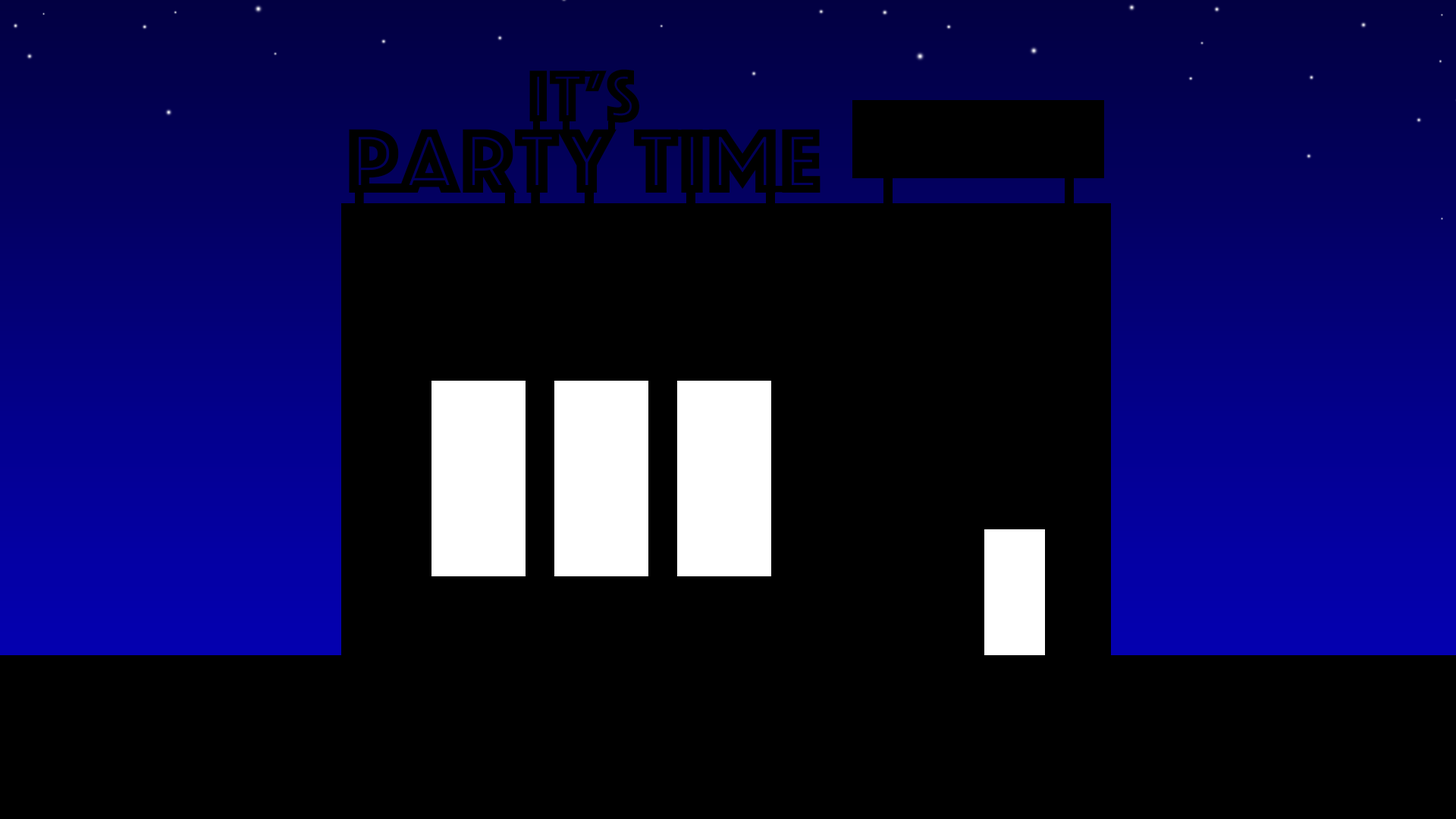
<style>
.page{position:relative;width:1456px;height:819px;background:#000000}
.page>*{position:absolute;margin:0}
.t1{font:75.8px "Phosphate-Inline";color:#000000}
.t2{font:22.8px "Phosphate-Inline";color:#000000}
</style>
<div class="page">
<p class="t1" style="left:529px;top:69px;width:110px;height:54px">It’s</p>
<p class="t2" style="left:349px;top:129px;width:472px;height:64px">party time</p>
</div>
